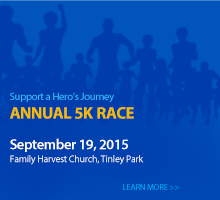
<style>
.page{position:relative;width:220px;height:200px}
.page>*{position:absolute;margin:0}
.t1{font:10.6px/12.6px "MyriadPro-Regular";letter-spacing:-0.025em;color:#38bcff}
.t2{font:16.5px/12.6px "MyriadPro-Bold";letter-spacing:-0.025em;color:#f4bc00;text-transform:uppercase}
.t3{font:9.9px/6.1px "MyriadPro-Regular";letter-spacing:-0.025em;color:#fefefe}
.t4{font:14.5px/6.1px "MyriadPro-Semibold";letter-spacing:-0.025em;color:#fefcfc}
.t5{font:8.6px "MyriadPro-Regular";letter-spacing:-0.025em;color:#00aaf7}
</style>
<div class="page">
<p class="t1" style="left:10px;top:92px;width:124px;height:27px">Support a Hero’s Journey<br><span class="t2">Annual 5K  Race</span></p>
<p class="t3" style="left:10px;top:138px;width:134px;height:27px"><span class="t4">September 19, 2015 <br></span>Family Harvest Church, Tinley Park</p>
<p class="t5" style="left:123px;top:184px;width:56px;height:6px">LEARN MORE &gt;&gt;</p>
</div>
